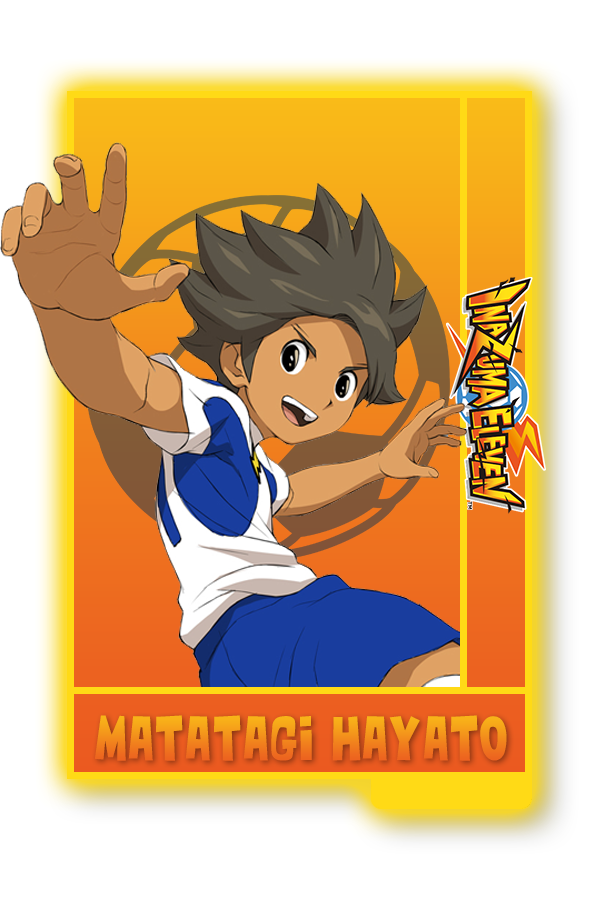
<style>
.page{position:relative;width:600px;height:900px;background:#ffffff}
.page>*{position:absolute;margin:0}
.t1{font:65.2px "TTG-Bold"}
</style>
<div class="page">
<p class="t1" style="left:95px;top:715px;width:412px;height:46px">Matatagi Hayato</p>
</div>
